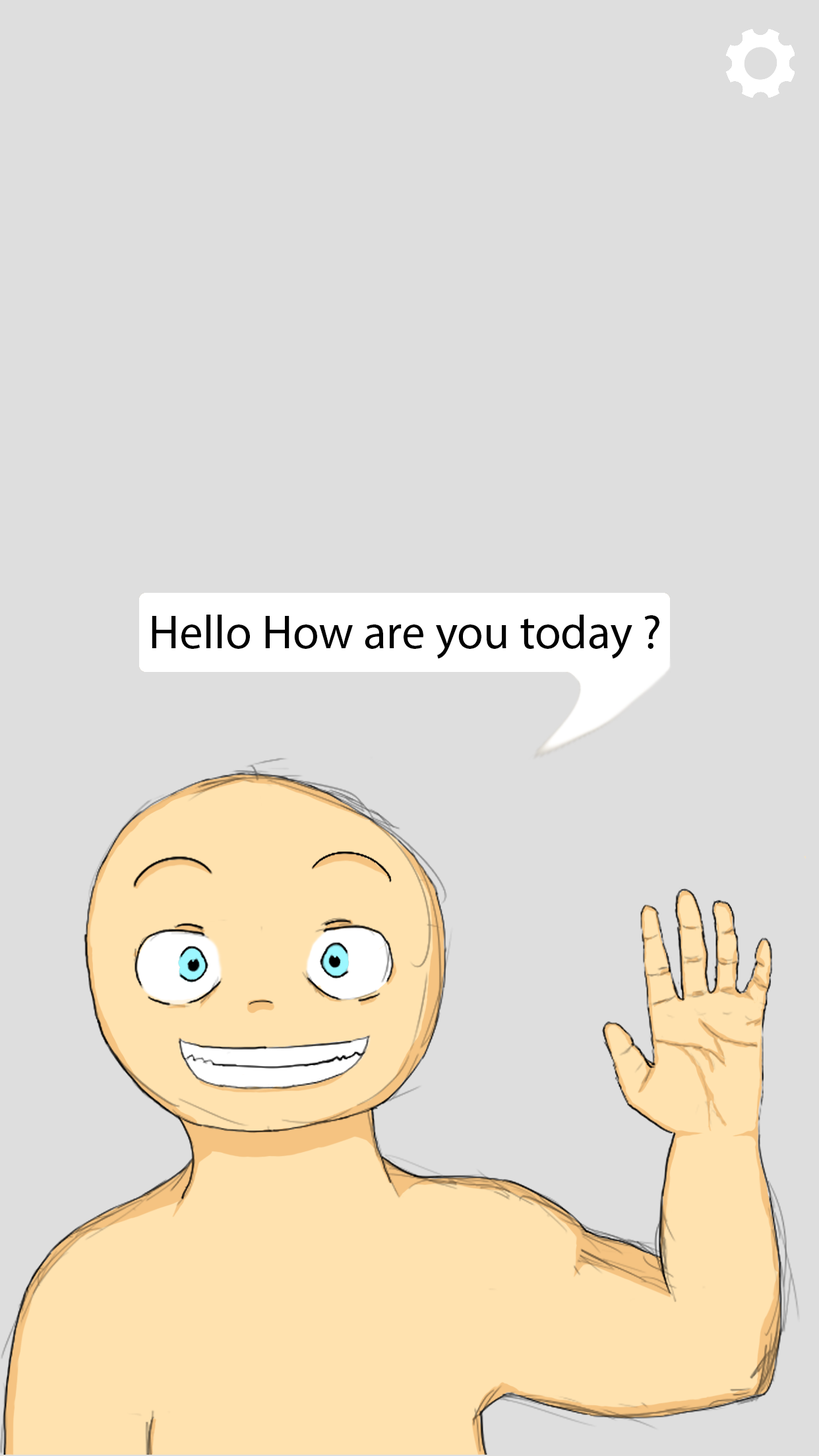
<style>
.page{position:relative;width:819px;height:1456px;background:#dedede}
.page>*{position:absolute;margin:0}
.t1{font:47.5px "MyriadPro-Regular";color:#000000}
</style>
<div class="page">
<p class="t1" style="left:152px;top:615px;width:507px;height:44px">Hello How are you today ?</p>
</div>
